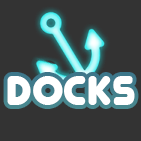
<style>
.page{position:relative;width:141px;height:141px;background:#333333}
.page>*{position:absolute;margin:0}
.t1{font:48px "Junegull";color:#ffffff}
</style>
<div class="page">
<p class="t1" style="left:7px;top:76px;width:128px;height:29px">DOCKS</p>
</div>
